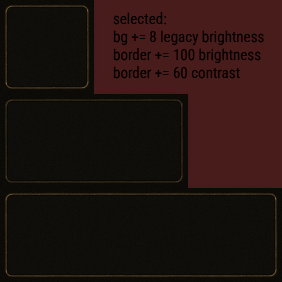
<style>
.page{position:relative;width:282px;height:282px;background:#491c1c}
.page>*{position:absolute;margin:0}
.t1{font:15px "RobotoCondensed-Regular";color:#000000}
</style>
<div class="page">
<p class="t1" style="left:113px;top:12px;width:151px;height:67px">selected:<br>bg += 8 legacy brightness<br>border += 100 brightness<br>border += 60 contrast</p>
</div>
